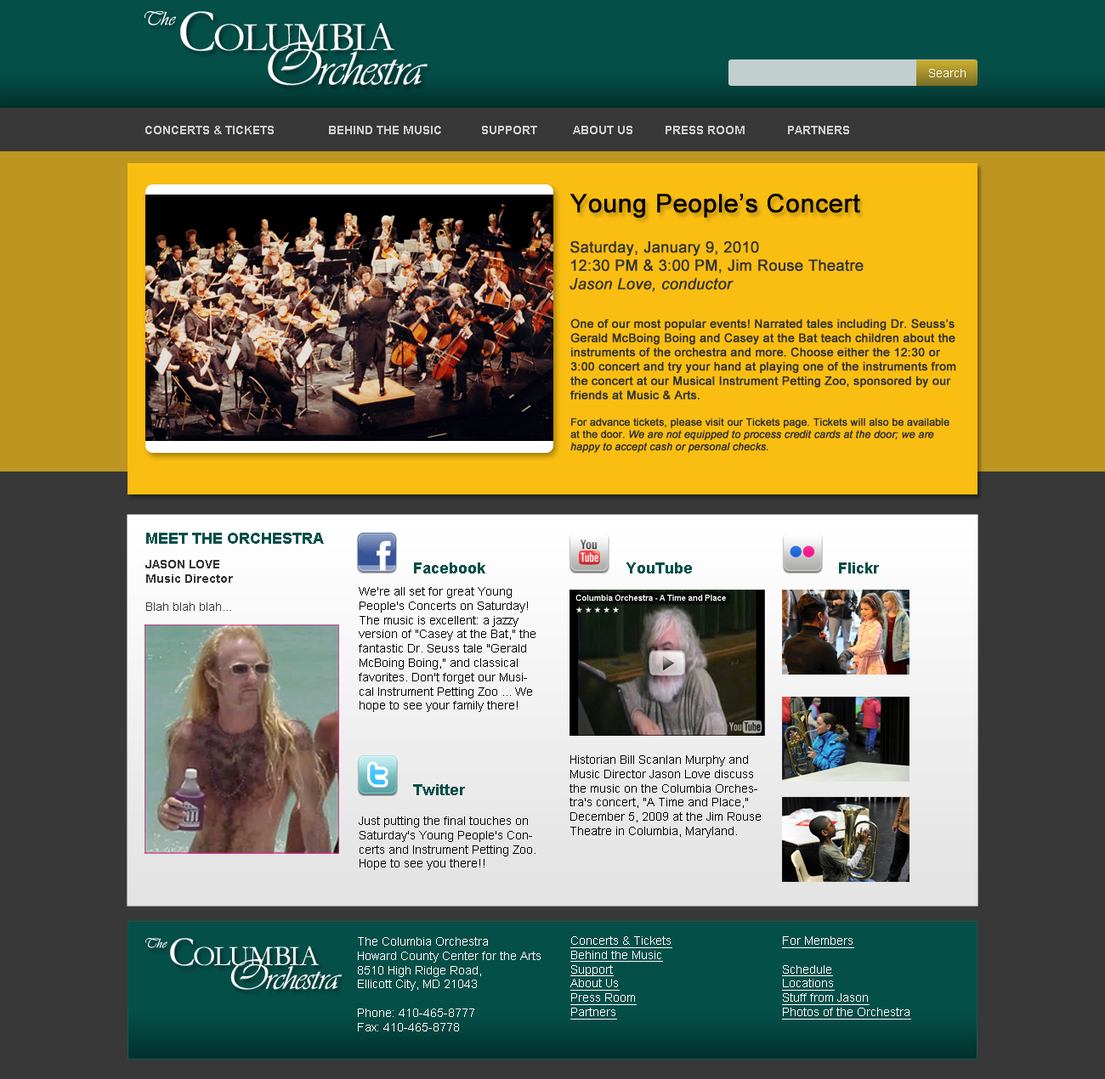
<style>
.page{position:relative;width:1105px;height:1079px}
.page>*{position:absolute;margin:0}
.t1{font:11.9px "ArialMT";color:#ffffff}
.t2{font:11.9px "Arial-BoldMT";color:#cdcdcd;text-transform:uppercase}
.t3{font:25.5px "ArialMT";color:#000000;font-weight:bold}
.t4{font:15.3px "ArialMT";color:#333333;font-weight:bold}
.t5{font:15.3px "Arial-ItalicMT";color:#333333;font-weight:bold}
.t6{font:11.9px "ArialMT";color:#333333;font-weight:bold}
.t7{font:10.2px "ArialMT";color:#333333;font-weight:bold}
.t8{font:10.2px "Arial-ItalicMT";color:#333333;font-weight:bold}
.t9{font:15.3px "Arial-BoldMT";color:#054f49;text-transform:uppercase}
.t10{font:11.9px "ArialMT";color:#373737}
.t11{font:11.9px "Arial-BoldMT";color:#373737;text-transform:uppercase}
.t12{font:11.9px "Arial-BoldMT";color:#373737}
.t13{font:15.3px "Arial-BoldMT";color:#054f49}
.t14{font:11.9px "ArialMT";color:#010101}
.t15{font:11.9px "ArialMT";color:#000000}
.t16{font:11.9px "ArialMT";color:#fefefe}
.t17{font:11.9px "ArialMT";color:#fefefe;text-decoration:underline}
.t18{font:11.9px "ArialMT";color:#ffffff;text-decoration:underline}
</style>
<div class="page">
<p class="t1" style="left:929px;top:69px;width:36px;height:8px">Search</p>
<p class="t2" style="left:145px;top:126px;width:704px;height:8px">Concerts &amp; Tickets  Behind the Music  Support  About Us  Press Room  Partners</p>
<p class="t3" style="left:570px;top:194px;width:290px;height:24px">Young People’s Concert</p>
<p class="t4" style="left:569px;top:241px;width:294px;height:51px">Saturday, January 9, 2010<br>12:30 PM &amp; 3:00 PM, Jim Rouse Theatre<br><span class="t5">Jason Love, conductor</span></p>
<p class="t6" style="left:570px;top:319px;width:386px;height:134px">One of our most popular events! Narrated tales including Dr. Seuss’s Gerald McBoing Boing and Casey at the Bat teach children about the instruments of the orchestra and more. Choose either the 12:30 or 3:00 concert and try your hand at playing one of the instruments from the concert at our Musical Instrument Petting Zoo, sponsored by our friends at Music &amp; Arts. <br><br><span class="t7">For advance tickets, please visit our Tickets page. Tickets will also be available at the door. </span><span class="t8">We are not equipped to process credit cards at the door; we are happy to accept cash or personal checks.</span></p>
<p class="t9" style="left:146px;top:533px;width:178px;height:11px">Meet the orchestra</p>
<p class="t10" style="left:145px;top:560px;width:88px;height:51px"><span class="t11">Jason Love<br></span><span class="t12">Music Director<br><br></span>Blah blah blah...</p>
<p class="t13" style="left:414px;top:563px;width:71px;height:11px">Facebook</p>
<p class="t13" style="left:626px;top:563px;width:66px;height:11px">YouTube<br>v</p>
<p class="t13" style="left:839px;top:563px;width:40px;height:11px">Flickr</p>
<p class="t14" style="left:359px;top:587px;width:176px;height:125px">We're all set for great Young People's Concerts on Saturday! The music is excellent: a jazzy version of "Casey at the Bat," the fantastic Dr. Seuss tale "Gerald McBoing Boing," and classical favorites. Don't forget our Musical Instrument Petting Zoo ... We hope to see your family there!</p>
<p class="t15" style="left:569px;top:756px;width:192px;height:82px">Historian Bill Scanlan Murphy and Music Director Jason Love discuss the music on the Columbia Orchestra's concert, "A Time and Place," December 5, 2009 at the Jim Rouse Theatre in Columbia, Maryland.</p>
<p class="t13" style="left:413px;top:784px;width:52px;height:11px">Twitter</p>
<p class="t14" style="left:359px;top:817px;width:176px;height:53px">Just putting the final touches on Saturday's Young People's Concerts and Instrument Petting Zoo. Hope to see you there!!</p>
<p class="t16" style="left:358px;top:937px;width:183px;height:95px">The Columbia Orchestra<br>Howard County Center for the Arts<br>8510 High Ridge Road, <br>Ellicott City, MD 21043<br><br>Phone: 410-465-8777<br>Fax: 410-465-8778</p>
<p class="t17" style="left:570px;top:937px;width:102px;height:83px">Concerts &amp; Tickets<br>Behind the Music<br>Support<br>About Us<br>Press Room<br>Partners</p>
<p class="t18" style="left:782px;top:937px;width:129px;height:83px">For Members<br><br>Schedule<br>Locations<br>Stuff from Jason<br>Photos of the Orchestra</p>
</div>
